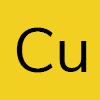
<style>
.page{position:relative;width:100px;height:100px;background:#f2d022}
.page>*{position:absolute;margin:0}
.t1{font:62.5px "Muli-Regular";color:#000000}
</style>
<div class="page">
<p class="t1" style="left:16px;top:27px;width:71px;height:46px">Cu</p>
</div>
